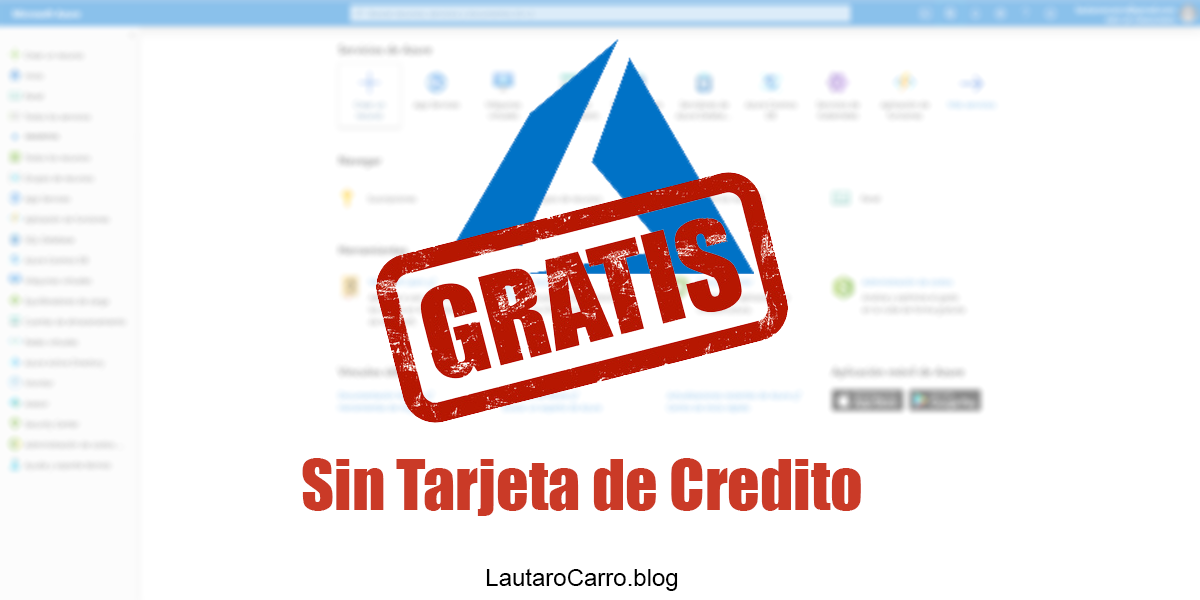
<style>
.page{position:relative;width:1200px;height:600px;background:#ffffff}
.page>*{position:absolute;margin:0}
.t1{font:64px "Impact";color:#ca3a27}
.t2{font:24px "ArialMT";color:#000000}
</style>
<div class="page">
<p class="t1" style="left:302px;top:458px;width:559px;height:58px">Sin Tarjeta de Credito</p>
<p class="t2" style="left:486px;top:568px;width:192px;height:23px">LautaroCarro.blog</p>
</div>
